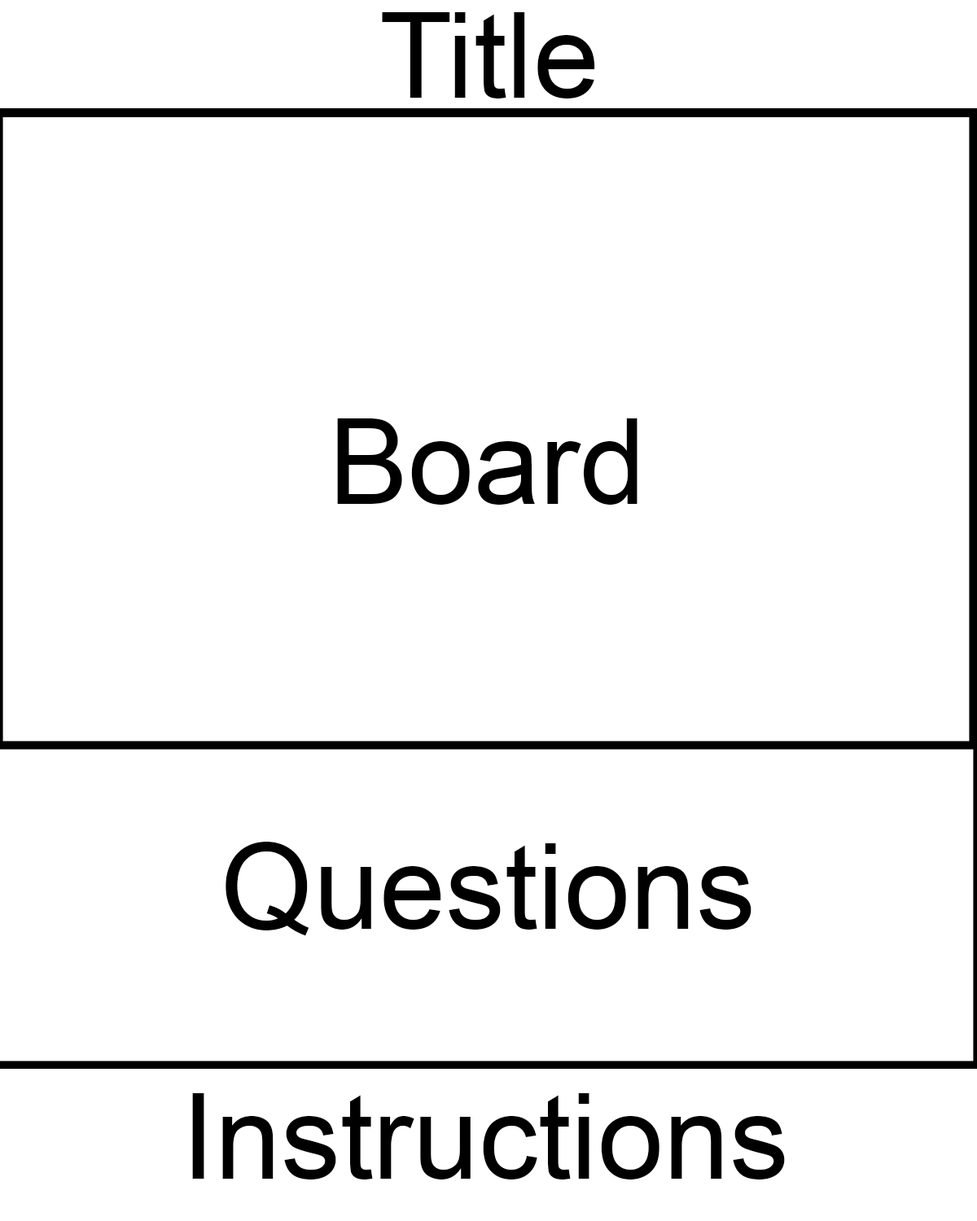
<style>
.page{position:relative;width:977px;height:1221px;background:#ffffff}
.page>*{position:absolute;margin:0}
.t1{font:118.7px "ArialMT";color:#000000}
</style>
<div class="page">
<p class="t1" style="left:382px;top:12px;width:213px;height:86px">Title</p>
<p class="t1" style="left:337px;top:418px;width:300px;height:87px">Board</p>
<p class="t1" style="left:225px;top:842px;width:526px;height:94px">Questions</p>
<p class="t1" style="left:192px;top:1093px;width:593px;height:86px">Instructions</p>
</div>
